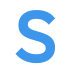
<style>
.page{position:relative;width:72px;height:72px;background:#ffffff}
.page>*{position:absolute;margin:0}
.t1{font:107.1px "Outfit-Regular";color:#3d96ea}
</style>
<div class="page">
<p class="t1" style="left:15px;top:10px;width:40px;height:54px">s</p>
</div>
